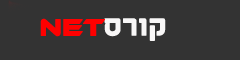
<style>
.page{position:relative;width:240px;height:60px;background:#333333}
.page>*{position:absolute;margin:0}
.t1{font:24px "EthnocentricRg-Regular";color:#ff0000;font-weight:bold}
.t2{font:36px "Aharoni-Bold";color:#f8f7f7;font-weight:bold}
</style>
<div class="page">
<p class="t1" style="left:40px;top:18px;width:65px;height:19px">Net</p>
<p class="t2" style="left:104px;top:18px;width:62px;height:23px">סרוק</p>
</div>
